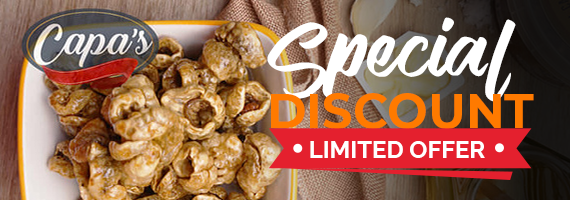
<style>
.page{position:relative;width:570px;height:200px}
.page>*{position:absolute;margin:0}
.t1{font:64px "VendettaRegular";letter-spacing:0.05em;color:#ffffff}
.t2{font:48px "Montserrat-Bold";color:#ff7a00;text-transform:uppercase}
.t3{font:24px "Raleway-Bold";color:#ffffff}
</style>
<div class="page">
<p class="t1" style="left:267px;top:17px;width:249px;height:85px">Special</p>
<p class="t2" style="left:271px;top:93px;width:263px;height:36px">Discount</p>
<p class="t3" style="left:310px;top:141px;width:175px;height:17px">LIMITED OFFER</p>
</div>
